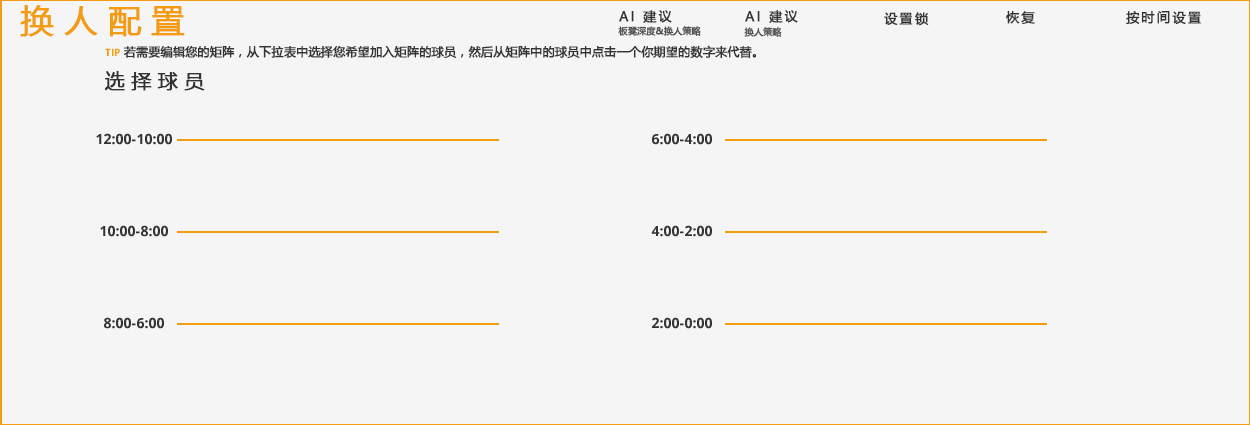
<style>
.page{position:relative;width:1250px;height:425px;background:#f5f5f5}
.page>*{position:absolute;margin:0}
.t1{font:33px "MicrosoftYaHei";letter-spacing:0.3em;color:#f39c12;font-weight:bold}
.t2{font:13px "MicrosoftYaHei";letter-spacing:0.16em;color:#333333;font-weight:bold}
.t3{font:9px "MicrosoftYaHei";color:#515151;font-weight:bold}
.t4{font:12px "MicrosoftYaHei";color:#333333;font-weight:bold}
.t5{font:20px "MicrosoftYaHei";letter-spacing:0.3em;color:#333333;font-weight:bold}
</style>
<div class="page">
<p class="t1" style="left:20px;top:5px;width:165px;height:32px">换人配置</p>
<p class="t2" style="left:619px;top:10px;width:53px;height:13px">AI 建议</p>
<p class="t2" style="left:745px;top:10px;width:53px;height:13px">AI 建议</p>
<p class="t2" style="left:884px;top:12px;width:45px;height:14px">设置锁</p>
<p class="t2" style="left:1006px;top:11px;width:29px;height:13px">恢复</p>
<p class="t2" style="left:1126px;top:11px;width:75px;height:14px">按时间设置</p>
<p class="t3" style="left:618px;top:26px;width:83px;height:10px">板凳深度&amp;换人策略</p>
<p class="t3" style="left:744px;top:27px;width:38px;height:10px">换人策略</p>
<p class="t4" style="left:123px;top:45px;width:634px;height:14px">若需要编辑您的矩阵，从下拉表中选择您希望加入矩阵的球员，然后从矩阵中的球员中点击一个你期望的数字来代替。</p>
<p class="t5" style="left:104px;top:71px;width:101px;height:20px">选择球员</p>
</div>
